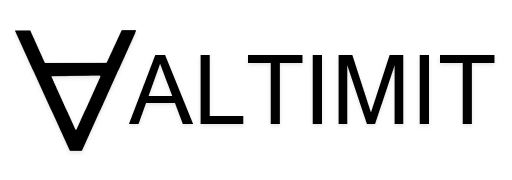
<style>
.page{position:relative;width:512px;height:180px;background:#ffffff}
.page>*{position:absolute;margin:0}
.t1{font:95.9px "MicrosoftSansSerif";color:#000000}
</style>
<div class="page">
<p class="t1" style="left:129px;top:55px;width:366px;height:69px">ALTIMIT</p>
</div>
